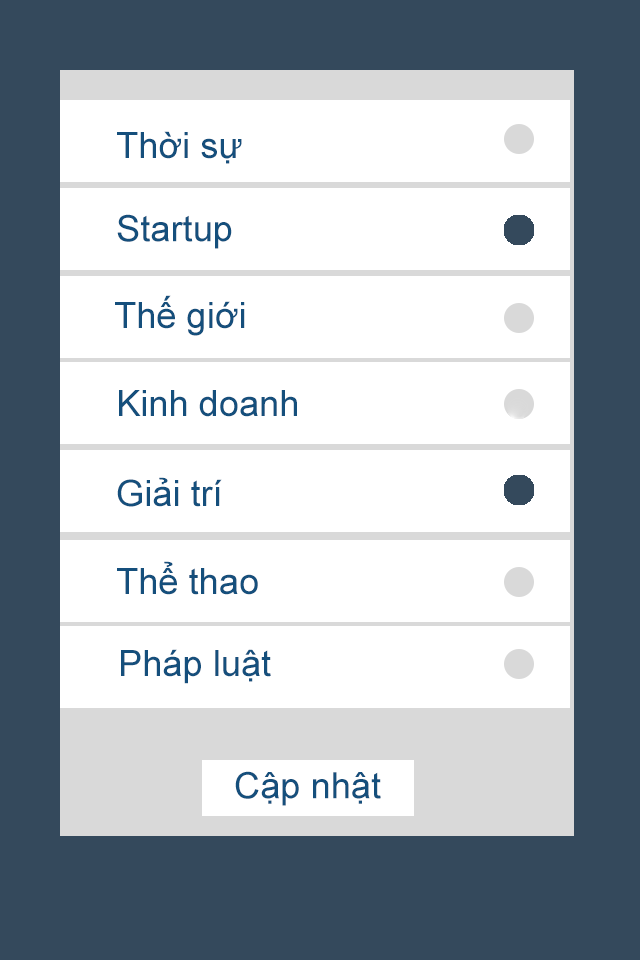
<style>
.page{position:relative;width:640px;height:960px;background:#ffffff}
.page>*{position:absolute;margin:0}
.t1{font:36.2px "ArialMT";color:#154f7c}
.t2{font:36.4px "ArialMT";color:#154f7c}
</style>
<div class="page">
<p class="t1" style="left:117px;top:131px;width:125px;height:33px">Thời sự</p>
<p class="t2" style="left:117px;top:214px;width:115px;height:35px">Startup</p>
<p class="t1" style="left:115px;top:295px;width:130px;height:41px">Thế giới</p>
<p class="t1" style="left:119px;top:390px;width:178px;height:27px">Kinh doanh</p>
<p class="t1" style="left:117px;top:477px;width:105px;height:30px">Giải trí</p>
<p class="t1" style="left:117px;top:561px;width:141px;height:34px">Thể thao</p>
<p class="t1" style="left:121px;top:649px;width:150px;height:35px">Pháp luật</p>
<p class="t2" style="left:235px;top:771px;width:146px;height:35px">Cập nhật</p>
</div>
